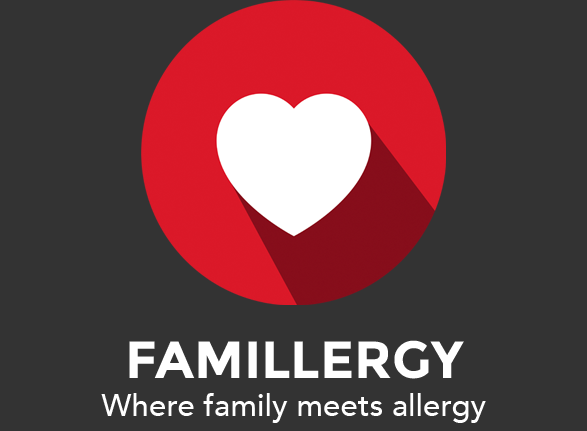
<style>
.page{position:relative;width:587px;height:431px;background:#333333}
.page>*{position:absolute;margin:0}
.t1{font:31.3px "Avenir-Medium";color:#ffffff}
.t2{font:52.2px "Montserrat-Bold";color:#ffffff}
</style>
<div class="page">
<p class="t1" style="left:101px;top:340px;width:385px;height:83px;text-align:center"><span class="t2">FAMILLERGY<br></span>Where family meets allergy</p>
</div>
